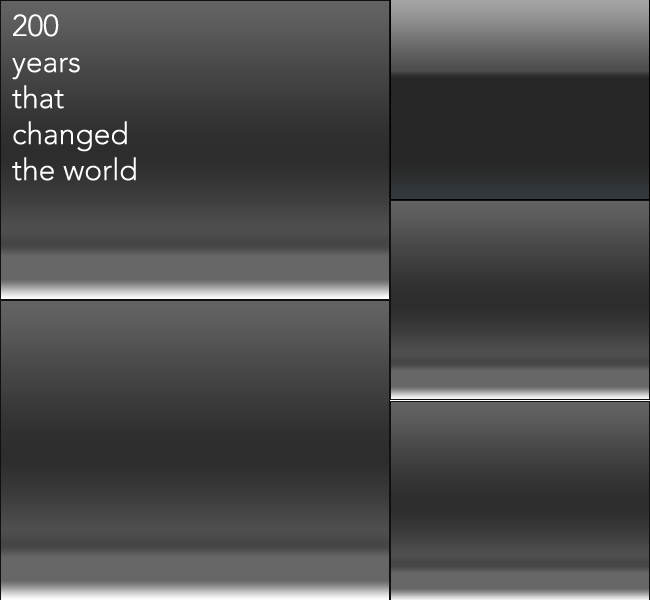
<style>
.page{position:relative;width:650px;height:600px}
.page>*{position:absolute;margin:0}
.t1{font:30px "AvenirLTStd-Light";color:#ffffff}
</style>
<div class="page">
<p class="t1" style="left:12px;top:14px;width:124px;height:167px">200 <br>years <br>that <br>changed <br>the world</p>
</div>
